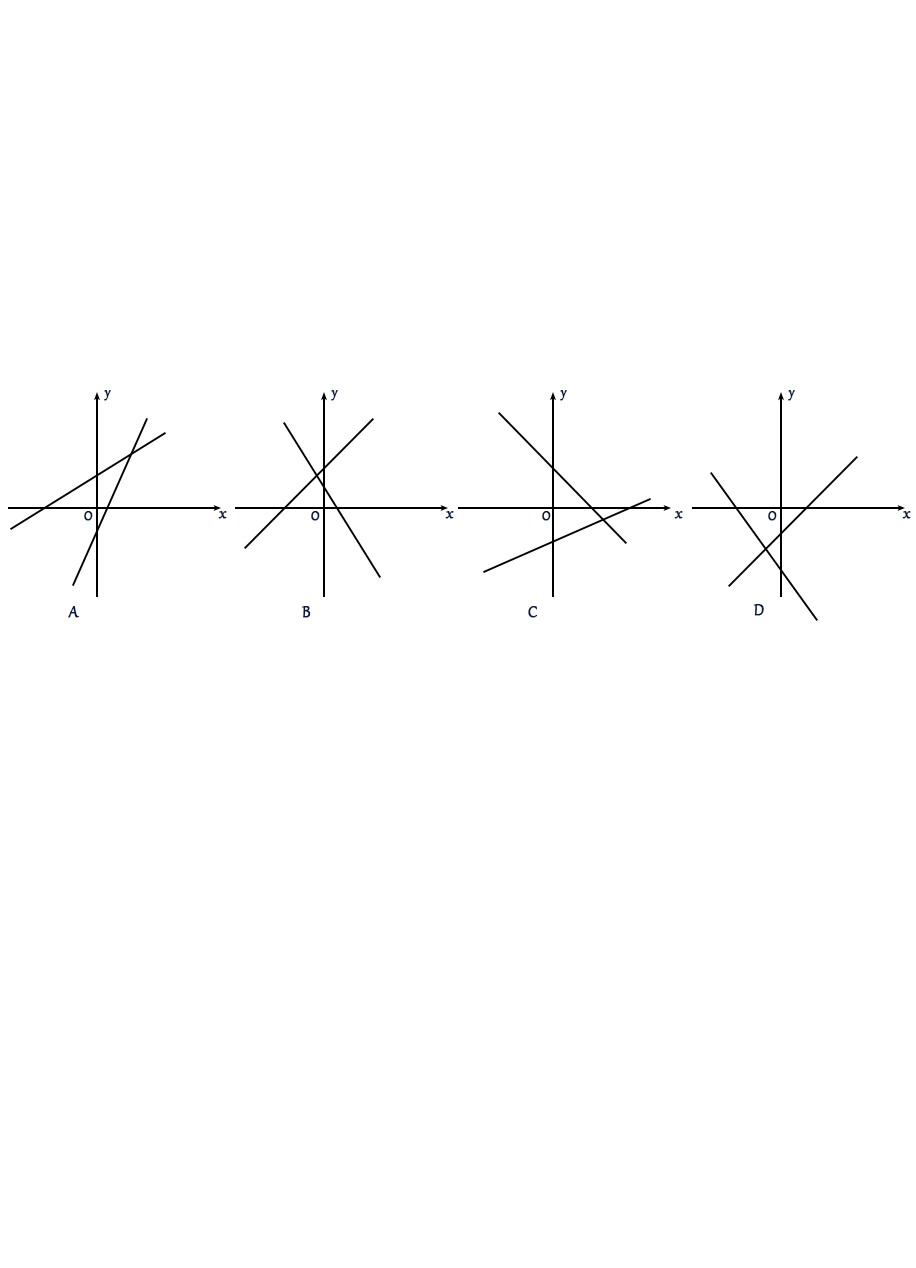
<style>
.page{position:relative;width:916px;height:1268px;background:#ffffff}
.page>*{position:absolute;margin:0}
.t1{font:16px "Gabriola";color:#081842;font-weight:bold}
.t2{font:18.7px "Gabriola";color:#081842;font-weight:bold}
</style>
<div class="page">
<p class="t1" style="left:104px;top:390px;width:7px;height:11px">y</p>
<p class="t1" style="left:331px;top:390px;width:7px;height:11px">y</p>
<p class="t1" style="left:560px;top:390px;width:7px;height:11px">y</p>
<p class="t1" style="left:788px;top:390px;width:7px;height:11px">y</p>
<p class="t1" style="left:84px;top:511px;width:9px;height:10px">O</p>
<p class="t2" style="left:218px;top:511px;width:9px;height:8px">x</p>
<p class="t1" style="left:311px;top:511px;width:9px;height:10px">O</p>
<p class="t2" style="left:445px;top:511px;width:9px;height:8px">x</p>
<p class="t1" style="left:542px;top:511px;width:9px;height:10px">O</p>
<p class="t2" style="left:674px;top:511px;width:9px;height:8px">x</p>
<p class="t1" style="left:768px;top:511px;width:9px;height:10px">O</p>
<p class="t2" style="left:902px;top:511px;width:9px;height:8px">x</p>
<p class="t2" style="left:68px;top:606px;width:11px;height:12px">A</p>
<p class="t2" style="left:301px;top:606px;width:10px;height:12px">B</p>
<p class="t2" style="left:528px;top:606px;width:10px;height:12px">C</p>
<p class="t2" style="left:753px;top:604px;width:11px;height:12px">D</p>
</div>
